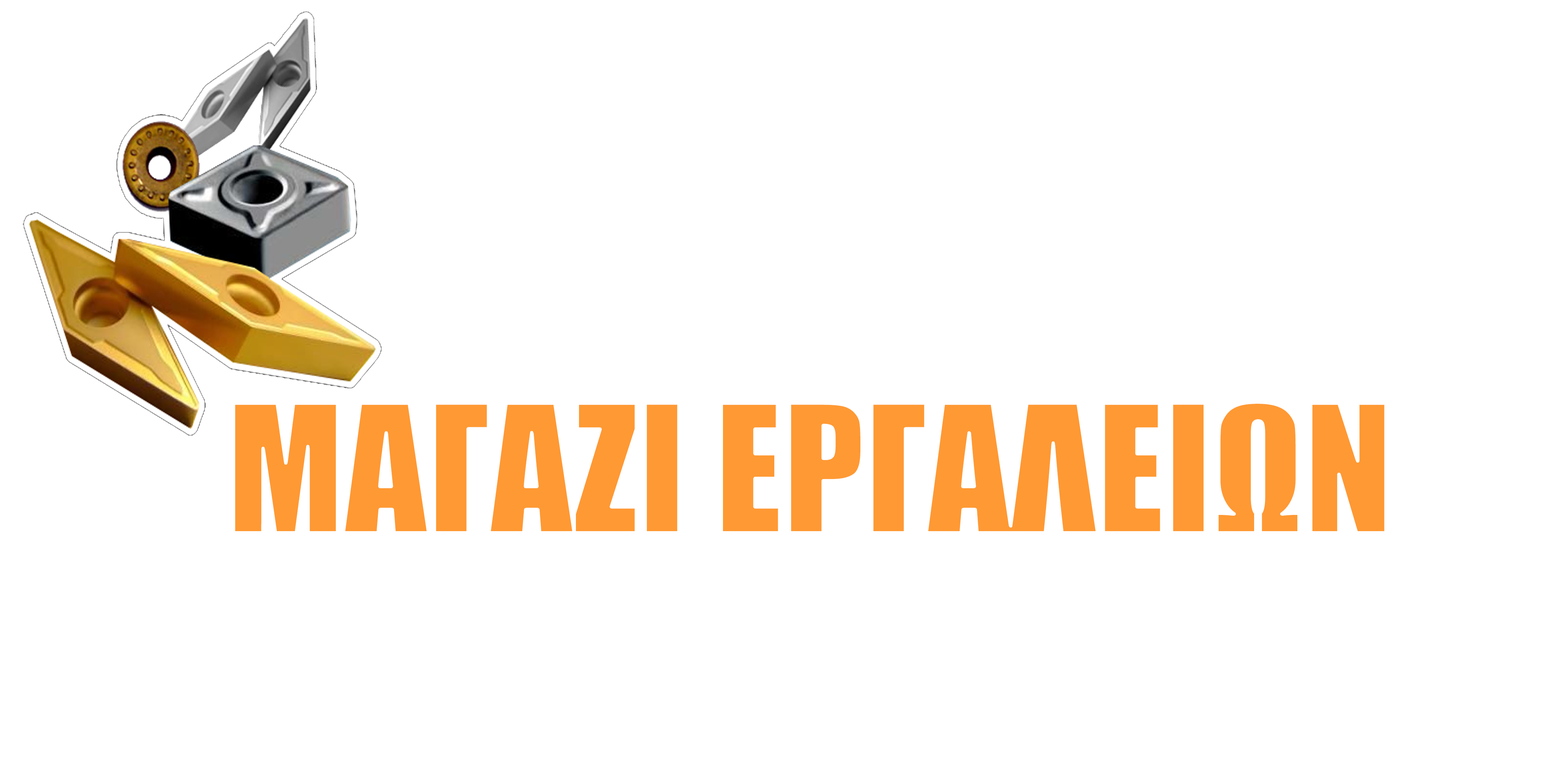
<style>
.page{position:relative;width:1544px;height:772px;background:#ffffff}
.page>*{position:absolute;margin:0}
.t1{font:164.1px "Impact";color:#ff9933}
</style>
<div class="page">
<p class="t1" style="left:233px;top:402px;width:1153px;height:131px">ΜΑΓΑΖΙ ΕΡΓΑΛΕΙΩΝ</p>
</div>
